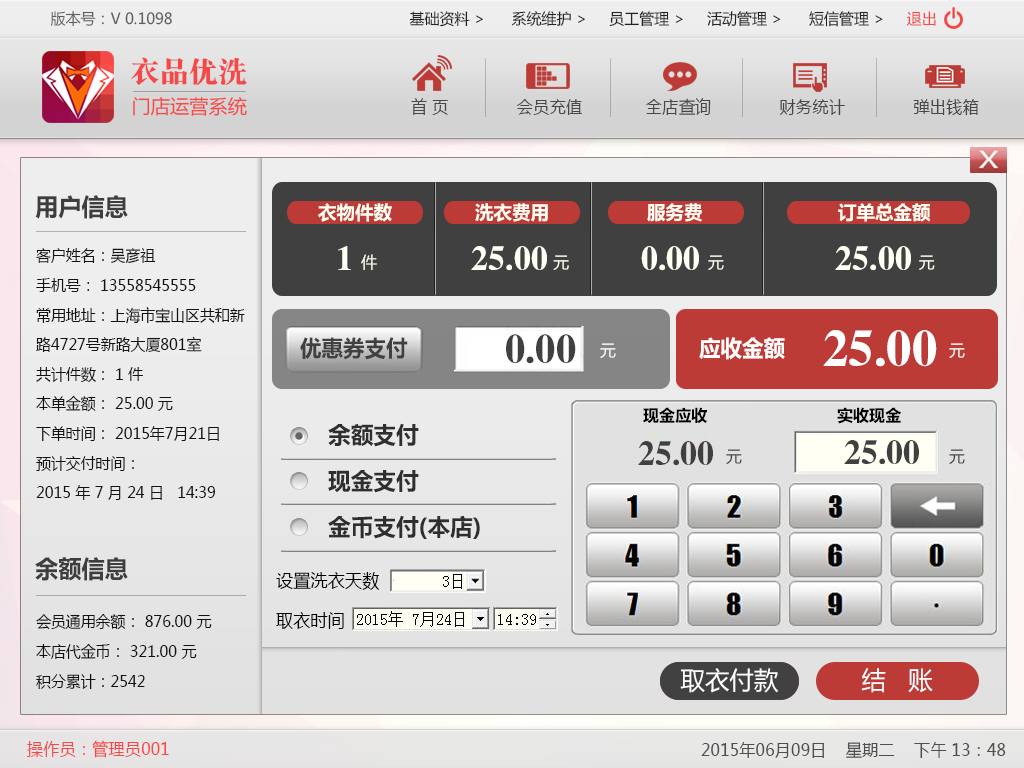
<style>
.page{position:relative;width:1024px;height:768px}
.page>*{position:absolute;margin:0}
.t1{font:15.3px "MicrosoftYaHei";color:#606060}
.t2{font:15.3px "MicrosoftYaHei";color:#242424}
.t3{font:15.3px "MicrosoftYaHei";color:#f44947}
.t4{font:29.6px "DFSong-XB-80-Win-GB";color:#f44947}
.t5{font:19.1px "MicrosoftYaHei";color:#f44947}
.t6{font:17px "MicrosoftYaHei";color:#474747;scale:0.97 1}
.t7{font:24px "MicrosoftYaHei-Bold";color:#3e3e3e;scale:0.97 1}
.t8{font:18.9px "MicrosoftYaHei-Bold";color:#fffff4}
.t9{font:35.1px "FZXBSFW--GB1-0";color:#fffff4;scale:0.97 1}
.t10{font:15.6px/29.6px "MicrosoftYaHei";color:#121212;scale:0.96 1}
.t11{font:22.3px "MicrosoftYaHei-Bold";color:#404040;scale:0.96 1}
.t12{font:42.1px "FZXBSFW--GB1-0";color:#404040;scale:0.96 1}
.t13{font:22.3px "MicrosoftYaHei-Bold";color:#ffffff;scale:0.96 1}
.t14{font:52.6px "FZXBSFW--GB1-0";color:#ffffff;scale:0.96 1}
.t15{font:16.2px "MicrosoftYaHei";color:#fffff4}
.t16{font:16px "MicrosoftYaHei-Bold";color:#000000}
.t17{font:23.1px/46.1px "MicrosoftYaHei-Bold";color:#2f2f2f}
.t18{font:35px "FZXBSFW--GB1-0";color:#404040;scale:0.96 1}
.t19{font:16.2px "MicrosoftYaHei";color:#404040}
.t20{font:18px "MicrosoftYaHei";color:#000000;scale:0.96 1}
.t21{font:25px "MicrosoftYaHei";color:#ffffff}
.t22{font:17.1px "MicrosoftYaHei";color:#f44947;scale:0.96 1}
.t23{font:17.1px "MicrosoftYaHei";color:#4f4f4f;scale:0.96 1}
</style>
<div class="page">
<p class="t1" style="left:50px;top:11px;width:122px;height:15px">版本号：V 0.1098</p>
<p class="t2" style="left:409px;top:11px;width:527px;height:16px">基础资料 &gt;      系统维护 &gt;     员工管理 &gt;     活动管理 &gt;      短信管理 &gt;     <span class="t3">退出</span></p>
<p class="t4" style="left:131px;top:57px;width:116px;height:28px">衣品优洗</p>
<p class="t5" style="left:133px;top:97px;width:114px;height:19px">门店运营系统</p>
<p class="t6" style="left:411px;top:98px;width:568px;height:17px">首 页              会员充值             全店查询              财务统计              弹出钱箱</p>
<p class="t7" style="left:35px;top:195px;width:93px;height:24px">用户信息</p>
<p class="t8" style="left:318px;top:203px;width:74px;height:19px">衣物件数</p>
<p class="t8" style="left:475px;top:203px;width:73px;height:19px">洗衣费用</p>
<p class="t8" style="left:647px;top:203px;width:55px;height:19px">服务费</p>
<p class="t8" style="left:838px;top:203px;width:93px;height:19px">订单总金额</p>
<p class="t9" style="left:338px;top:246px;width:573px;height:25px">1              25.00           0.00                25.00</p>
<p class="t10" style="left:36px;top:248px;width:209px;height:252px">客户姓名：吴彦祖<br>手机号： 13558545555                    <br>常用地址：上海市宝山区共和新<br>路4727号新路大厦801室<br>共计件数： 1 件                             <br>本单金额： 25.00 元                       <br>下单时间： 2015年7月21日                 <br>预计交付时间：<br>2015 年 7 月 24 日   14:39</p>
<p class="t11" style="left:300px;top:337px;width:108px;height:23px">优惠券支付</p>
<p class="t12" style="left:506px;top:334px;width:70px;height:30px">0.00</p>
<p class="t13" style="left:699px;top:337px;width:86px;height:23px">应收金额</p>
<p class="t14" style="left:823px;top:330px;width:114px;height:37px">25.00</p>
<p class="t15" style="left:600px;top:343px;width:16px;height:15px">元</p>
<p class="t15" style="left:949px;top:343px;width:16px;height:15px">元</p>
<p class="t16" style="left:643px;top:407px;width:258px;height:17px">现金应收                           实收现金</p>
<p class="t17" style="left:328px;top:423px;width:152px;height:116px">余额支付<br>现金支付<br>金币支付(本店)</p>
<p class="t18" style="left:638px;top:441px;width:75px;height:25px">25.00</p>
<p class="t19" style="left:726px;top:449px;width:16px;height:15px">元</p>
<p class="t18" style="left:844px;top:440px;width:75px;height:25px">25.00</p>
<p class="t19" style="left:949px;top:449px;width:16px;height:15px">元</p>
<p class="t7" style="left:35px;top:557px;width:93px;height:24px">余额信息</p>
<p class="t20" style="left:276px;top:572px;width:104px;height:18px">设置洗衣天数</p>
<p class="t10" style="left:36px;top:614px;width:176px;height:75px">会员通用余额： 876.00 元<br>本店代金币： 321.00 元<br>积分累计：2542</p>
<p class="t20" style="left:276px;top:612px;width:68px;height:17px">取衣时间</p>
<p class="t21" style="left:680px;top:668px;width:99px;height:25px">取衣付款</p>
<p class="t21" style="left:861px;top:668px;width:72px;height:25px">结   账</p>
<p class="t22" style="left:27px;top:740px;width:142px;height:18px">操作员：管理员001</p>
<p class="t23" style="left:701px;top:742px;width:305px;height:16px">2015年06月09日    星期二    下午 13：48</p>
</div>
